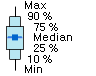
<style>
.page{position:relative;width:96px;height:76px;background:#ffffff}
.page>*{position:absolute;margin:0}
.t1{font:10.7px "Gulim";color:#000000}
</style>
<div class="page">
<p class="t1" style="left:25px;top:1px;width:21px;height:8px">Max</p>
<p class="t1" style="left:28px;top:12px;width:24px;height:8px">90 %</p>
<p class="t1" style="left:34px;top:23px;width:24px;height:8px">75 %</p>
<p class="t1" style="left:34px;top:33px;width:38px;height:8px">Median</p>
<p class="t1" style="left:34px;top:44px;width:24px;height:8px">25 %</p>
<p class="t1" style="left:25px;top:65px;width:17px;height:8px">Min</p>
<p class="t1" style="left:28px;top:55px;width:24px;height:8px">10 %</p>
</div>
